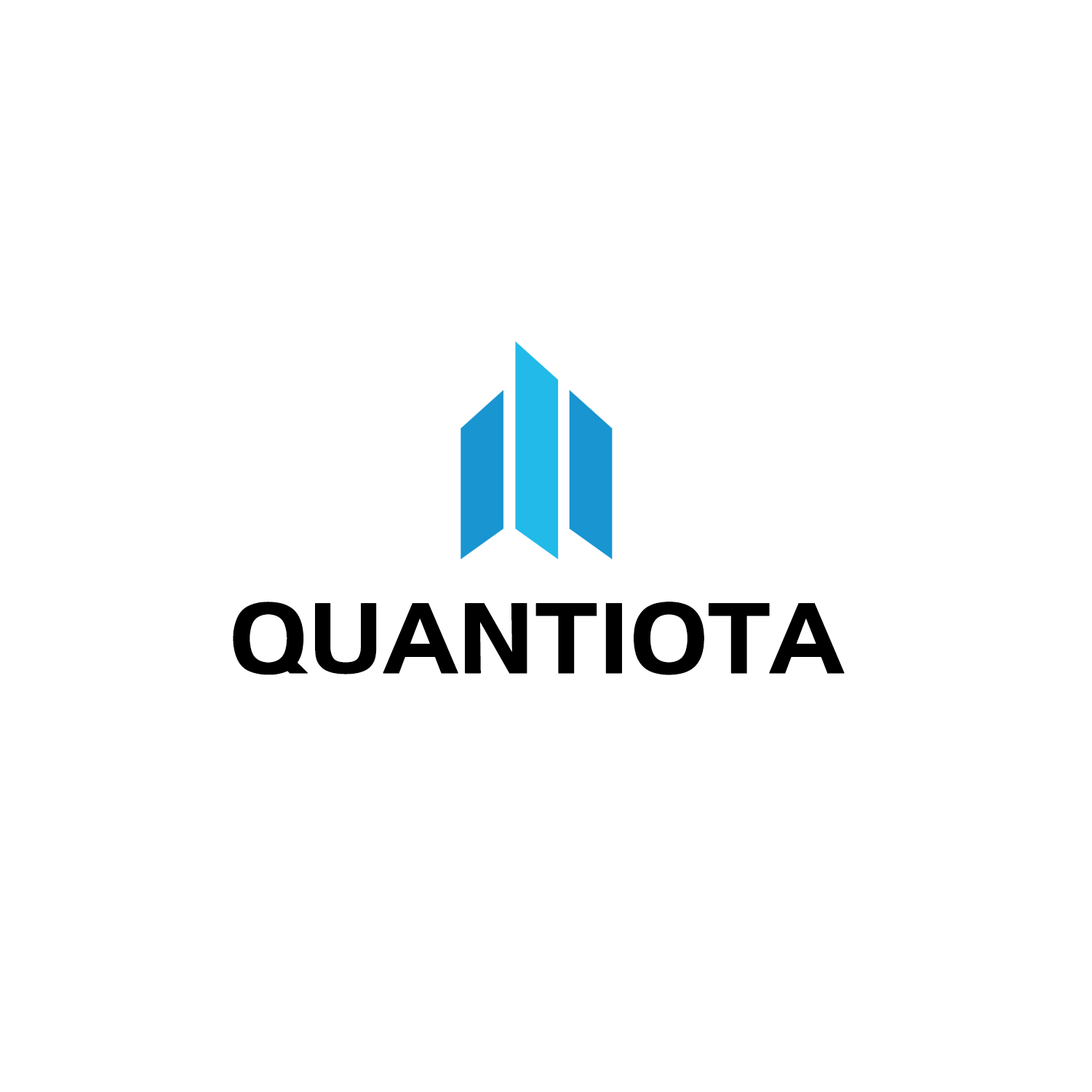
<style>
.page{position:relative;width:1092px;height:1092px;background:#ffffff}
.page>*{position:absolute;margin:0}
.t1{font:97px "HandelGothic";color:#000000;text-transform:uppercase;font-weight:bold}
</style>
<div class="page">
<p class="t1" style="left:233px;top:602px;width:612px;height:73px">QUANTIOTA</p>
</div>
